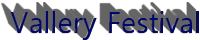
<style>
.page{position:relative;width:200px;height:40px;background:#ffffff}
.page>*{position:absolute;margin:0}
.t1{font:28.5px "MalgunGothic";color:#02076c}
</style>
<div class="page">
<p class="t1" style="left:10px;top:11px;width:189px;height:29px">Vallery Festival</p>
</div>
